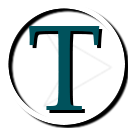
<style>
.page{position:relative;width:128px;height:128px;background:#ffffff}
.page>*{position:absolute;margin:0}
.t1{font:120.8px "BookAntiqua";color:#00525c}
</style>
<div class="page">
<p class="t1" style="left:29px;top:26px;width:71px;height:84px">T</p>
</div>
